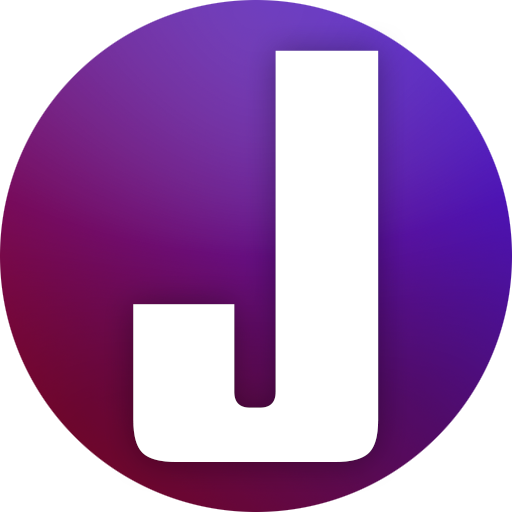
<style>
.page{position:relative;width:512px;height:512px;background:#ffffff}
.page>*{position:absolute;margin:0}
.t1{font:512px "GyparodyHv-Regular";color:#ffffff}
</style>
<div class="page">
<p class="t1" style="left:133px;top:50px;width:246px;height:412px">J</p>
</div>
